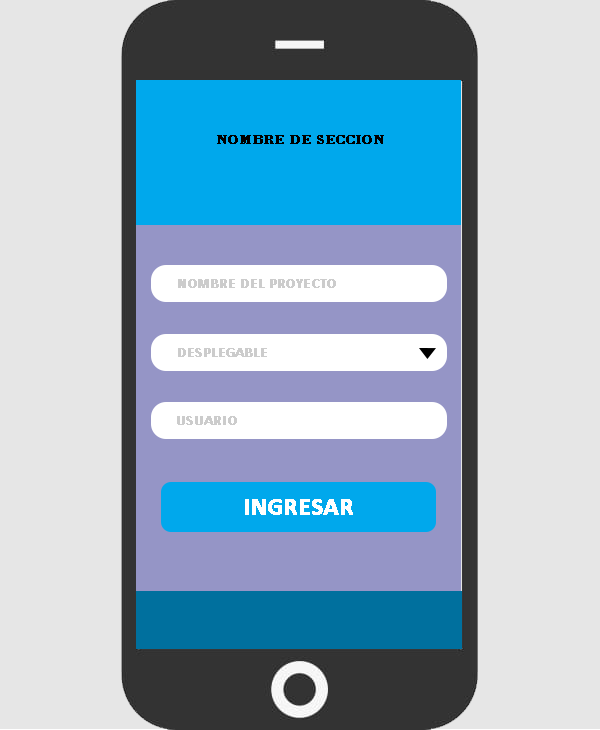
<style>
.page{position:relative;width:600px;height:730px;background:#e6e6e6}
.page>*{position:absolute;margin:0}
.t1{font:14px "BodoniBT-Bold";color:#000000;text-transform:uppercase;font-weight:bold}
.t2{font:14px "Calibri-Bold";color:#cccccc;text-transform:uppercase;font-weight:bold}
.t3{font:24px "Calibri-Bold";color:#ffffff;text-transform:uppercase;font-weight:bold}
</style>
<div class="page">
<p class="t1" style="left:217px;top:135px;width:167px;height:9px">NOMBRE DE SECCION</p>
<p class="t2" style="left:178px;top:279px;width:158px;height:9px">NOMBRE DEL PROYECTO</p>
<p class="t2" style="left:178px;top:348px;width:89px;height:9px">DESPLEGABLE</p>
<p class="t2" style="left:177px;top:416px;width:60px;height:9px">USUARIO</p>
<p class="t3" style="left:245px;top:499px;width:108px;height:16px">INGRESAR</p>
</div>
